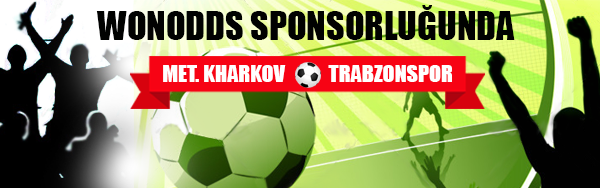
<style>
.page{position:relative;width:600px;height:188px}
.page>*{position:absolute;margin:0}
.t1{font:36.7px "Impact";color:#010201;text-transform:uppercase}
.t2{font:22.4px "Impact";color:#ffffff;text-transform:uppercase}
</style>
<div class="page">
<p class="t1" style="left:96px;top:5px;width:419px;height:35px">Wonodds sponsorluğunda</p>
<p class="t2" style="left:163px;top:65px;width:123px;height:17px">met. kharkov</p>
<p class="t2" style="left:328px;top:65px;width:124px;height:17px">Trabzonspor</p>
</div>
